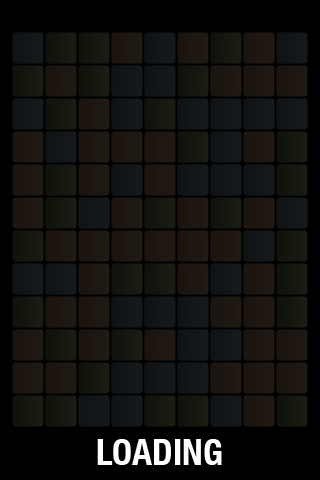
<style>
.page{position:relative;width:320px;height:480px;background:#000000}
.page>*{position:absolute;margin:0}
.t1{font:36px "HelveticaNeue-CondensedBold";color:#ffffff}
</style>
<div class="page">
<p class="t1" style="left:97px;top:439px;width:125px;height:26px">LOADING</p>
</div>
